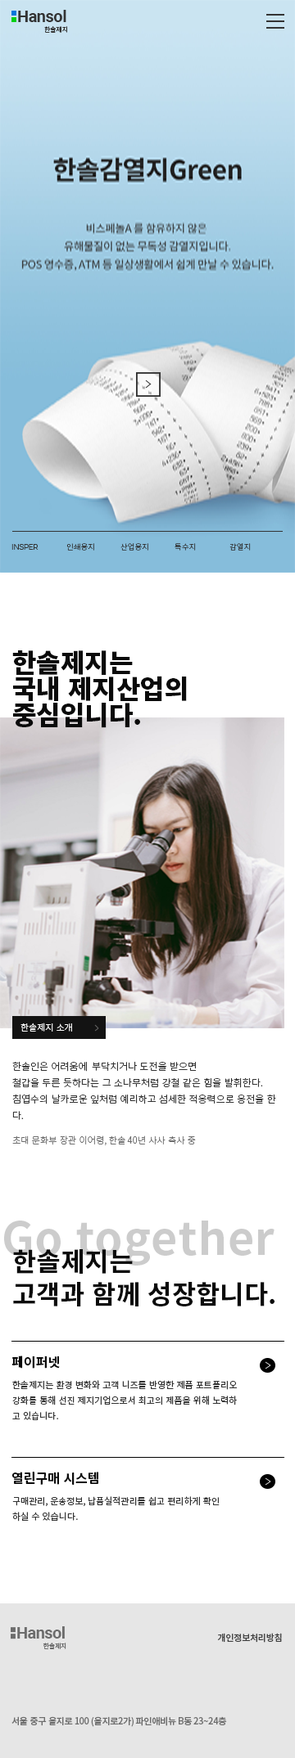
<style>
.page{position:relative;width:295px;height:1758px;background:#ffffff}
.page>*{position:absolute;margin:0}
.t1{font:16.4px "Roboto-Bold";letter-spacing:-0.025em;color:#333333}
.t2{font:6.5px "NotoSansKR-Regular";letter-spacing:-0.025em;color:#333333}
.t3{font:7.8px "Roboto-Light";color:#333333}
.t4{font:7.8px "NotoSansKR-Light";color:#333333}
.t5{font:26.2px/26.2px "NotoSansKR-Black";color:#0a0a0a}
.t6{font:9px "NotoSansKR-Light";color:#ffffff}
.t7{font:9.8px/16.4px "NotoSansKR-Light";color:#333333}
.t8{font:9.2px "NotoSansKR-Light";color:#6c6c6c}
.t9{font:26.2px/32.7px "NotoSansKR-Bold";color:#0b0b0b}
.t10{font:13.1px "NotoSansKR-Bold";color:#0a0a0a}
.t11{font:9px/15.5px "NotoSansKR-Regular";color:#333333}
.t12{font:16.4px "Roboto-Bold";letter-spacing:-0.025em;color:#6c6c6c}
.t13{font:9px "NotoSansKR-Medium";letter-spacing:-0.025em;color:#434343}
.t14{font:6.6px "NotoSansKR-Regular";letter-spacing:-0.025em;color:#6c6c6c}
.t15{font:9px "NotoSansKR-Medium";letter-spacing:-0.025em;color:#6c6c6c}
</style>
<div class="page">
<p class="t1" style="left:18px;top:10px;width:48px;height:12px">Hansol</p>
<p class="t2" style="left:44px;top:26px;width:23px;height:7px">한솔제지</p>
<p class="t3" style="left:11px;top:544px;width:27px;height:6px">INSPER</p>
<p class="t4" style="left:66px;top:543px;width:28px;height:8px">인쇄용지</p>
<p class="t4" style="left:120px;top:543px;width:28px;height:8px">산업용지</p>
<p class="t4" style="left:174px;top:543px;width:22px;height:8px">특수지</p>
<p class="t4" style="left:229px;top:543px;width:21px;height:8px">감열지</p>
<p class="t5" style="left:12px;top:650px;width:175px;height:78px">한솔제지는<br>국내 제지산업의<br>중심입니다.</p>
<p class="t6" style="left:20px;top:1023px;width:52px;height:9px">한솔제지 소개</p>
<p class="t7" style="left:12px;top:1061px;width:264px;height:59px">한솔인은 어려움에  부닥치거나 도전을 받으면<br>철갑을 두른 듯하다는 그 소나무처럼 강철 같은 힘을 발휘한다.<br>침엽수의 날카로운 잎처럼 예리하고 섬세한 적응력으로 응전을 한<br>다.</p>
<p class="t8" style="left:12px;top:1136px;width:184px;height:9px">초대 문화부 장관 이어령, 한솔 40년 사사 축사 중</p>
<p class="t9" style="left:13px;top:1249px;width:261px;height:58px">한솔제지는<br>고객과 함께 성장합니다.</p>
<p class="t10" style="left:11px;top:1356px;width:49px;height:13px">페이퍼넷</p>
<p class="t11" style="left:12px;top:1380px;width:224px;height:40px">한솔제지는 환경 변화와 고객 니즈를 반영한 제품 포트폴리오<br>강화를 통해 선진 제지기업으로서 최고의 제품을 위해 노력하<br>고 있습니다.</p>
<p class="t10" style="left:11px;top:1472px;width:87px;height:13px">열린구매 시스템</p>
<p class="t11" style="left:12px;top:1496px;width:207px;height:26px">구매관리, 운송정보, 납품실적관리를 쉽고 편리하게 확인<br>하실 수 있습니다.</p>
<p class="t12" style="left:17px;top:1627px;width:48px;height:12px">Hansol</p>
<p class="t13" style="left:217px;top:1633px;width:64px;height:10px">개인정보처리방침</p>
<p class="t14" style="left:43px;top:1643px;width:23px;height:6px">한솔제지</p>
<p class="t15" style="left:11px;top:1717px;width:216px;height:10px">서울 중구 을지로 100 (을지로2가) 파인애비뉴 B동 23~24층</p>
</div>
